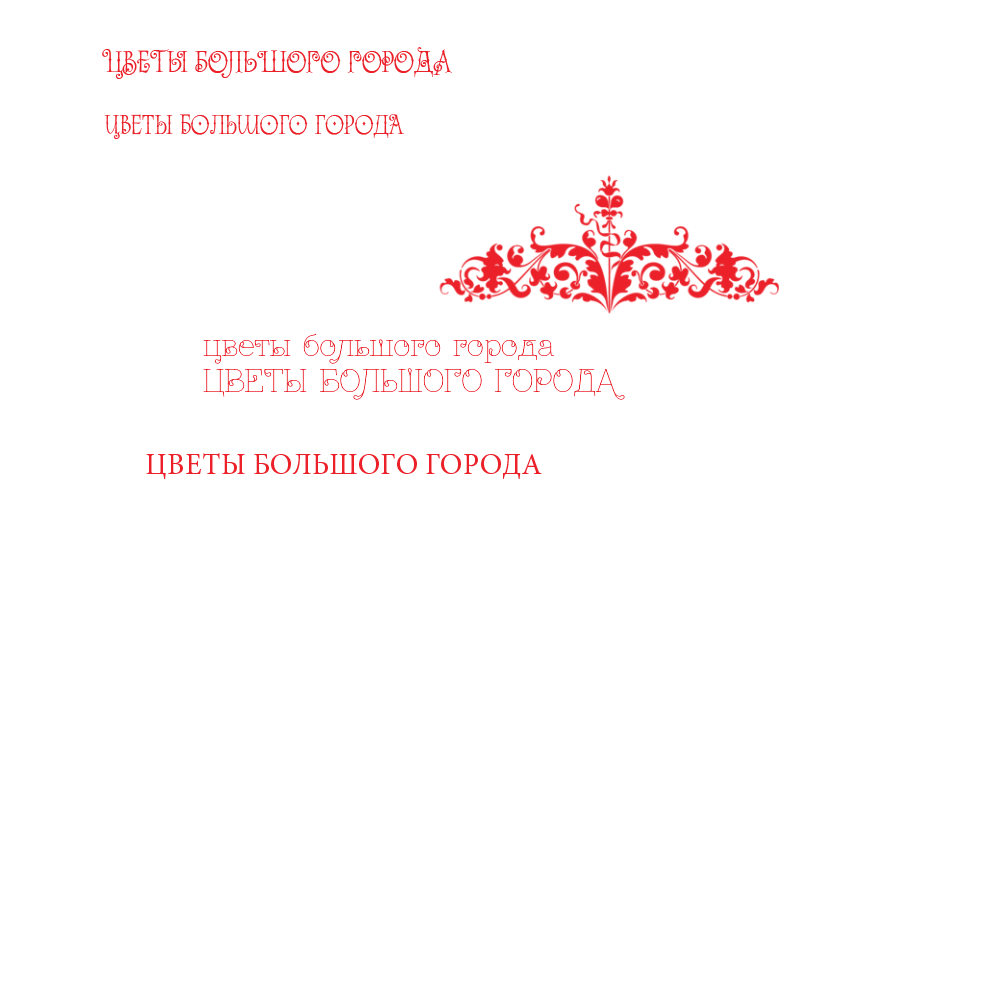
<style>
.page{position:relative;width:1000px;height:1000px;background:#ffffff}
.page>*{position:absolute;margin:0}
.t1{font:30px "Alice";color:#eb2029}
.t2{font:30px "MinionPro-Regular";color:#eb2029}
</style>
<div class="page">
<p class="t1" style="left:102px;top:47px;width:350px;height:32px">ЦВЕТЫ БОЛЬШОГО ГОРОДА</p>
<p class="t1" style="left:104px;top:114px;width:300px;height:25px">цветы большого города</p>
<p class="t2" style="left:146px;top:453px;width:396px;height:26px">ЦВЕТЫ БОЛЬШОГО ГОРОДА</p>
</div>
